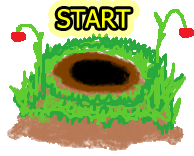
<style>
.page{position:relative;width:194px;height:156px;background:#ffffff}
.page>*{position:absolute;margin:0}
.t1{font:25px "Tahoma";color:#fcff05}
</style>
<div class="page">
<p class="t1" style="left:57px;top:9px;width:74px;height:19px">START</p>
</div>
